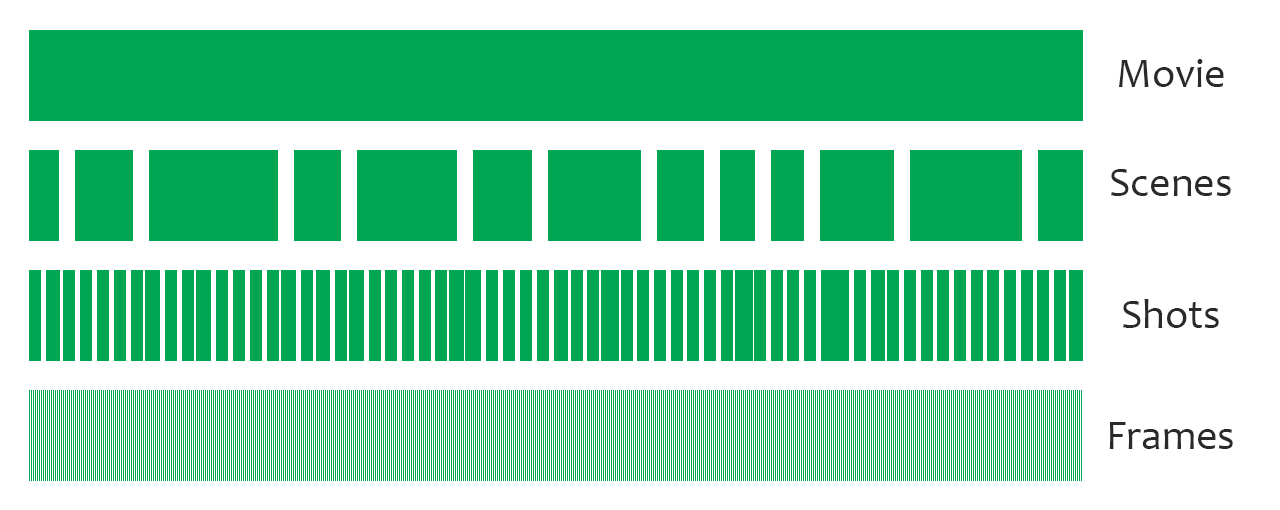
<style>
.page{position:relative;width:1280px;height:510px;background:#ffffff}
.page>*{position:absolute;margin:0}
.t1{font:41.7px "Candara";color:#2a2a28}
</style>
<div class="page">
<p class="t1" style="left:1119px;top:59px;width:105px;height:28px">Movie</p>
<p class="t1" style="left:1111px;top:169px;width:120px;height:27px">Scenes</p>
<p class="t1" style="left:1123px;top:299px;width:96px;height:29px">Shots</p>
<p class="t1" style="left:1109px;top:422px;width:124px;height:27px">Frames</p>
</div>
